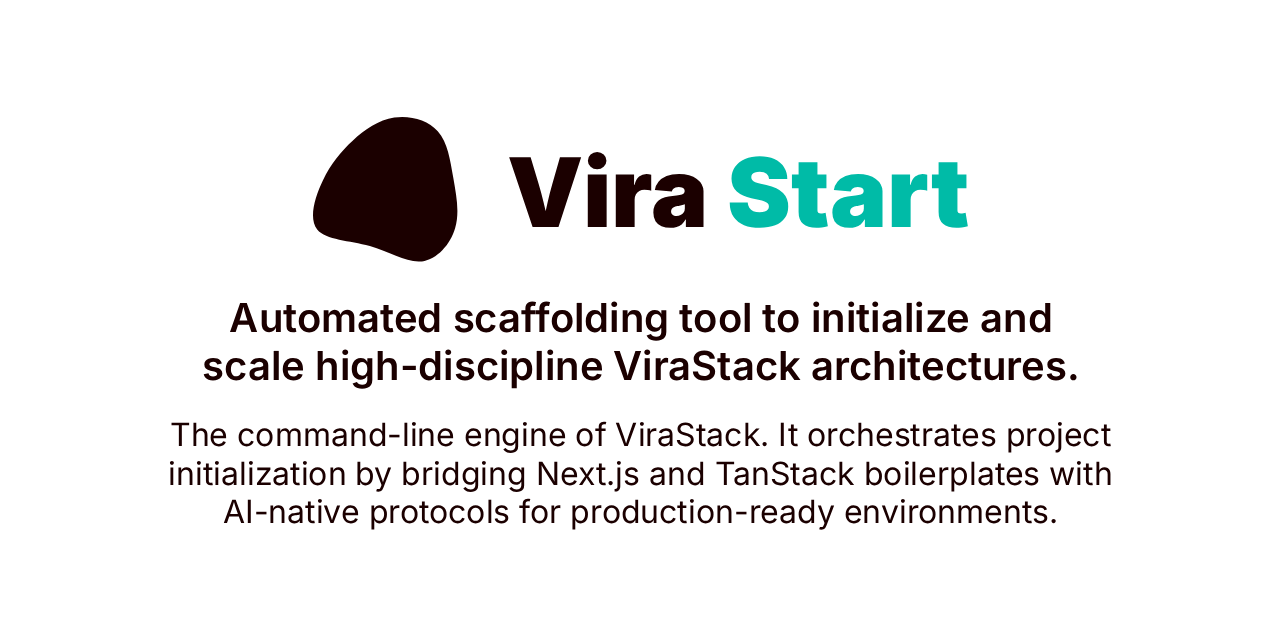
<style>
.page{position:relative;width:1280px;height:640px;background:#ffffff}
.page>*{position:absolute;margin:0}
.t1{font:96px "Inter-Black";color:#00bba7}
.t2{font:96px "Inter-Black";color:#1b0000}
.t3{font:40px "Inter-SemiBold";color:#1b0000}
.t4{font:32px "Inter-Regular";color:#1b0000}
</style>
<div class="page">
<p class="t1" style="left:509px;top:152px;width:459px;height:76px"><span class="t2">Vira </span>Start</p>
<p class="t3" style="left:203px;top:301px;width:874px;height:88px;text-align:center">Automated scaffolding tool to initialize and scale high-discipline ViraStack architectures.</p>
<p class="t4" style="left:169px;top:421px;width:942px;height:109px;text-align:center">The command-line engine of ViraStack. It orchestrates project initialization by bridging Next.js and TanStack boilerplates with AI-native protocols for production-ready environments.</p>
</div>
